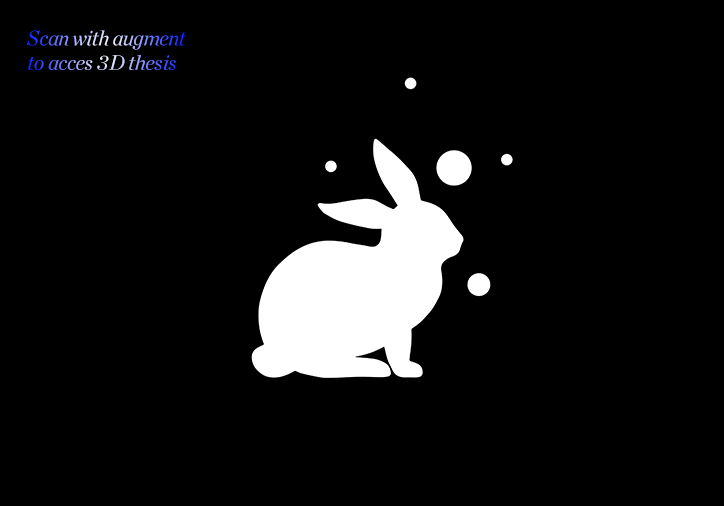
<style>
.page{position:relative;width:724px;height:506px;background:#000000}
.page>*{position:absolute;margin:0}
.t1{font:20.9px/24.4px "ChronicleDisplay-Italic"}
</style>
<div class="page">
<p class="t1" style="left:26px;top:30px;width:161px;height:40px">Scan with augment<br>to acces 3D thesis</p>
</div>
